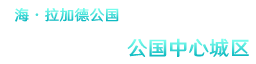
<style>
.page{position:relative;width:256px;height:64px;background:#ffffff}
.page>*{position:absolute;margin:0}
.t1{font:14.7px "HYWenHei-FEW";letter-spacing:0.025em}
.t2{font:20px "HYWenHei-FEW";letter-spacing:0.025em}
</style>
<div class="page">
<p class="t1" style="left:14px;top:8px;width:105px;height:14px">海·拉加德公国</p>
<p class="t2" style="left:127px;top:38px;width:122px;height:19px">公国中心城区</p>
</div>
